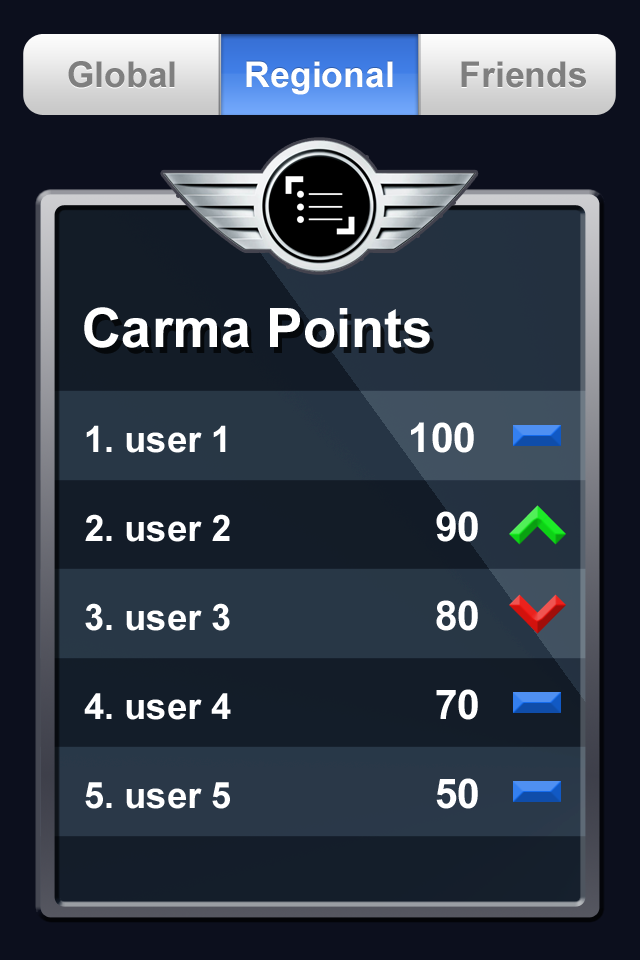
<style>
.page{position:relative;width:640px;height:960px;background:#0c0f1d}
.page>*{position:absolute;margin:0}
.t1{font:35.6px "Arial-BoldMT";color:#7f7f7f}
.t2{font:35.6px "Arial-BoldMT";color:#ffffff}
.t3{font:54.3px "Arial-BoldMT";color:#ffffff}
.t4{font:36.2px "Arial-BoldMT";color:#ffffff}
.t5{font:40.8px "Arial-BoldMT";color:#ffffff}
</style>
<div class="page">
<p class="t1" style="left:68px;top:61px;width:107px;height:27px">Global</p>
<p class="t2" style="left:246px;top:61px;width:147px;height:34px">Regional</p>
<p class="t1" style="left:461px;top:61px;width:125px;height:27px">Friends</p>
<p class="t3" style="left:84px;top:307px;width:346px;height:41px">Carma Points</p>
<p class="t4" style="left:86px;top:425px;width:140px;height:28px">1. user 1</p>
<p class="t5" style="left:411px;top:422px;width:63px;height:31px">100</p>
<p class="t4" style="left:85px;top:514px;width:145px;height:28px">2. user 2</p>
<p class="t5" style="left:436px;top:511px;width:42px;height:31px">90</p>
<p class="t4" style="left:85px;top:603px;width:145px;height:28px">3. user 3</p>
<p class="t5" style="left:436px;top:600px;width:42px;height:31px">80</p>
<p class="t5" style="left:436px;top:689px;width:42px;height:31px">70</p>
<p class="t4" style="left:84px;top:693px;width:147px;height:27px">4. user 4</p>
<p class="t4" style="left:85px;top:782px;width:145px;height:27px">5. user 5</p>
<p class="t5" style="left:436px;top:778px;width:42px;height:31px">50</p>
</div>
